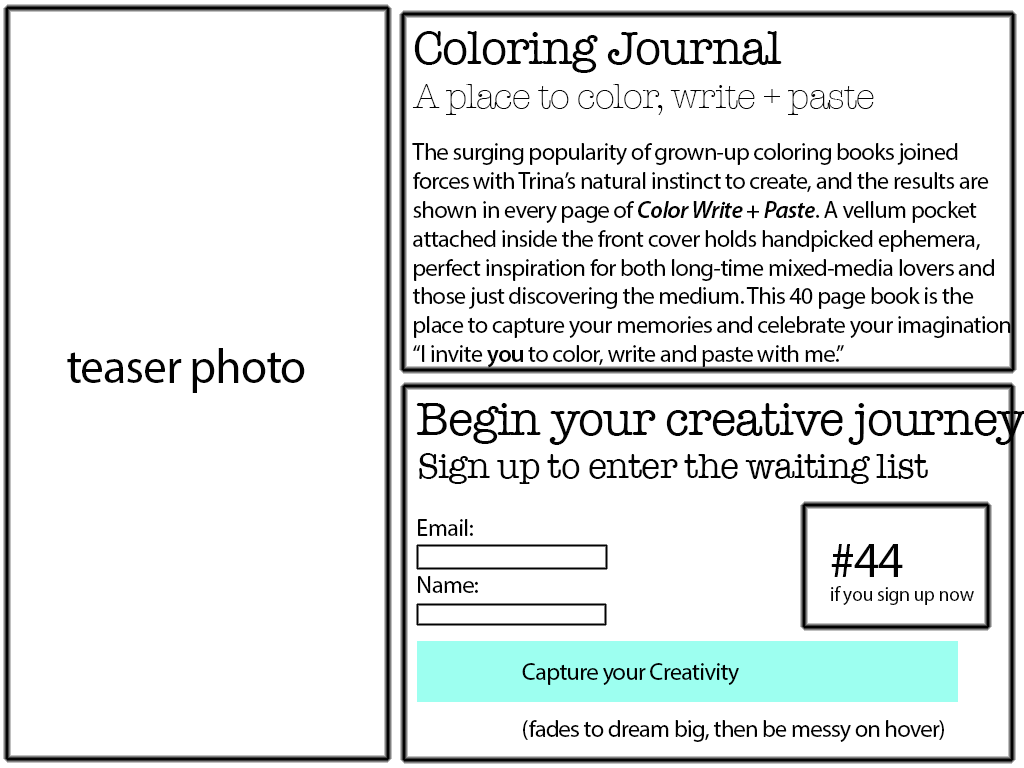
<style>
.page{position:relative;width:1024px;height:768px;background:#ffffff}
.page>*{position:absolute;margin:0}
.t1{font:24px "MyriadPro-Regular";letter-spacing:-0.025em;color:#020202}
.t2{font:48px "AmericanTypewriter";letter-spacing:-0.025em;color:#020202}
.t3{font:36px "AmericanTypewriter-Light";letter-spacing:-0.025em;color:#020202}
.t4{font:24px "MyriadPro-SemiboldIt";letter-spacing:-0.025em;color:#020202}
.t5{font:24px "MyriadPro-Semibold";letter-spacing:-0.025em;color:#020202}
.t6{font:48px "MyriadPro-Regular";letter-spacing:-0.025em;color:#020202}
.t7{font:20px "MyriadPro-Regular";letter-spacing:-0.025em;color:#020202}
.t8{font:50px "MyriadPro-Regular";letter-spacing:-0.025em;color:#020202}
</style>
<div class="page">
<p class="t1" style="left:412px;top:31px;width:599px;height:337px"><span class="t2">Coloring Journal<br></span><span class="t3">A place to color, write + paste<br><br></span>The surging popularity of grown-up coloring books joined<br>forces with Trina’s natural instinct to create, and the results are<br>shown in every page of <span class="t4">Color Write + Paste</span>. A vellum pocket<br>attached inside the front cover holds handpicked ephemera,<br>perfect inspiration for both long-time mixed-media lovers and<br>those just discovering the medium. This 40 page book is the<br>place to capture your memories and celebrate your imagination <br>“I invite <span class="t5">you</span> to color, write and paste with me.”</p>
<p class="t6" style="left:67px;top:348px;width:238px;height:45px">teaser photo</p>
<p class="t7" style="left:831px;top:544px;width:143px;height:61px"><span class="t8">#44<br></span>if you sign up now</p>
<p class="t1" style="left:522px;top:663px;width:422px;height:79px">Capture your Creativity<br><br>(fades to dream big, then be messy on hover)</p>
</div>
